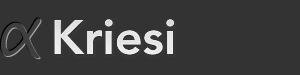
<style>
.page{position:relative;width:300px;height:75px;background:#333333}
.page>*{position:absolute;margin:0}
.t1{font:48px "Avenir-Heavy";color:#ffffff}
</style>
<div class="page">
<p class="t1" style="left:54px;top:19px;width:120px;height:36px">Kriesi</p>
<p class="t1" style="left:54px;top:19px;width:120px;height:36px">Kriesi</p>
</div>
